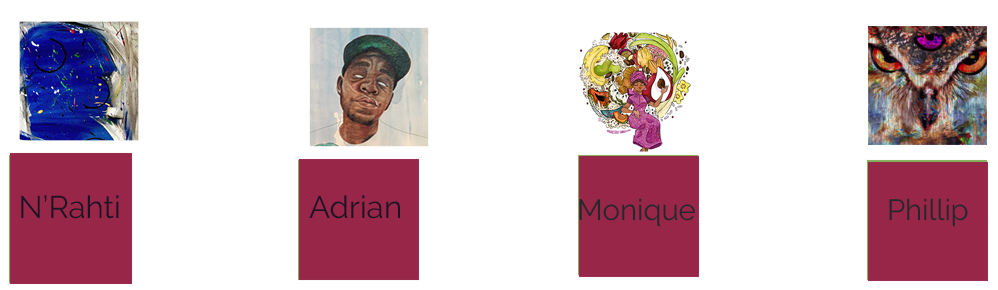
<style>
.page{position:relative;width:998px;height:290px;background:#ffffff}
.page>*{position:absolute;margin:0}
.t1{font:31.2px "Raleway-Regular";color:#1a1423}
.t2{font:36.5px "Raleway-Light";color:#1a1423}
.t3{font:31.2px "Raleway-Light";color:#1a1423}
.t4{font:29.2px "Raleway-Regular";color:#26272d}
</style>
<div class="page">
<p class="t1" style="left:21px;top:195px;width:98px;height:24px"><span class="t2"><br></span>N’Rahti</p>
<p class="t1" style="left:309px;top:195px;width:91px;height:24px"><span class="t3"><br></span>Adrian</p>
<p class="t4" style="left:579px;top:198px;width:116px;height:29px">Monique</p>
<p class="t4" style="left:889px;top:198px;width:79px;height:29px">Phillip</p>
</div>
